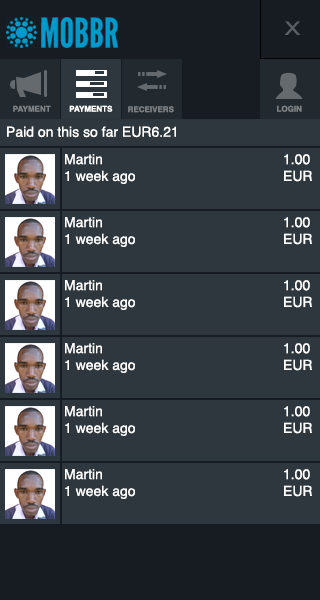
<style>
.page{position:relative;width:320px;height:600px;background:#2e373d}
.page>*{position:absolute;margin:0}
.t1{font:9.3px "ArialNarrow";color:#595f64;scale:1.52 1}
.t2{font:8px "Helvetica-Bold";color:#7f8284}
.t3{font:8px "Helvetica-Bold";color:#ffffff}
.t4{font:14px "Helvetica";color:#ffffff}
</style>
<div class="page">
<p class="t1" style="left:284px;top:21px;width:16px;height:14px">X</p>
<p class="t2" style="left:13px;top:105px;width:38px;height:7px">PAYMENT</p>
<p class="t3" style="left:69px;top:105px;width:44px;height:7px">PAYMENTS</p>
<p class="t2" style="left:128px;top:106px;width:46px;height:7px">RECEIVERS</p>
<p class="t2" style="left:277px;top:105px;width:25px;height:7px">LOGIN</p>
<p class="t4" style="left:7px;top:126px;width:169px;height:12px">Paid on this so far EUR6.21</p>
<p class="t4" style="left:65px;top:154px;width:70px;height:30px">Martin<br>1 week ago</p>
<p class="t4" style="left:284px;top:154px;width:28px;height:28px">1.00<br>EUR</p>
<p class="t4" style="left:65px;top:217px;width:70px;height:30px">Martin<br>1 week ago</p>
<p class="t4" style="left:284px;top:217px;width:28px;height:28px">1.00<br>EUR</p>
<p class="t4" style="left:65px;top:280px;width:70px;height:30px">Martin<br>1 week ago</p>
<p class="t4" style="left:284px;top:280px;width:28px;height:28px">1.00<br>EUR</p>
<p class="t4" style="left:65px;top:343px;width:70px;height:30px">Martin<br>1 week ago</p>
<p class="t4" style="left:284px;top:343px;width:28px;height:28px">1.00<br>EUR</p>
<p class="t4" style="left:65px;top:406px;width:70px;height:30px">Martin<br>1 week ago</p>
<p class="t4" style="left:284px;top:406px;width:28px;height:28px">1.00<br>EUR</p>
<p class="t4" style="left:65px;top:469px;width:70px;height:30px">Martin<br>1 week ago</p>
<p class="t4" style="left:284px;top:469px;width:28px;height:28px">1.00<br>EUR</p>
</div>
